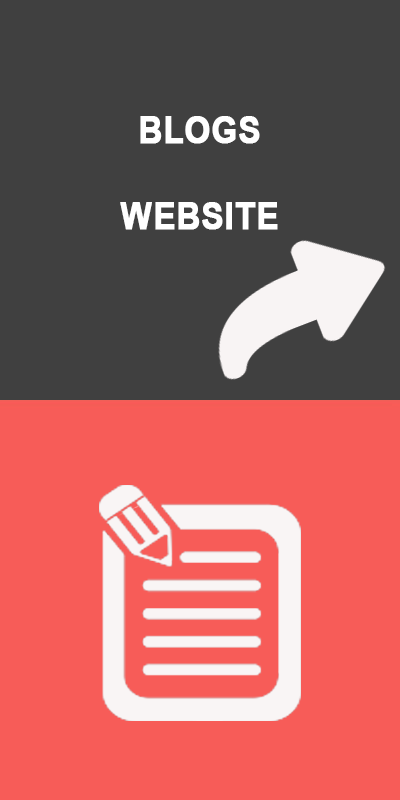
<style>
.page{position:relative;width:400px;height:800px;background:#404040}
.page>*{position:absolute;margin:0}
.t1{font:37.4px "Arial-BoldMT";color:#ffffff;font-weight:bold;scale:0.89 1}
</style>
<div class="page">
<p class="t1" style="left:120px;top:116px;width:158px;height:114px;text-align:center">BLOGS<br><br>WEBSITE</p>
</div>
